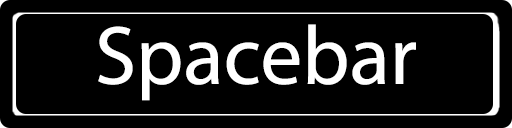
<style>
.page{position:relative;width:512px;height:128px;background:#000000}
.page>*{position:absolute;margin:0}
.t1{font:83.3px "MyriadPro-Regular";color:#ffffff}
</style>
<div class="page">
<p class="t1" style="left:98px;top:24px;width:318px;height:77px">Spacebar</p>
</div>
